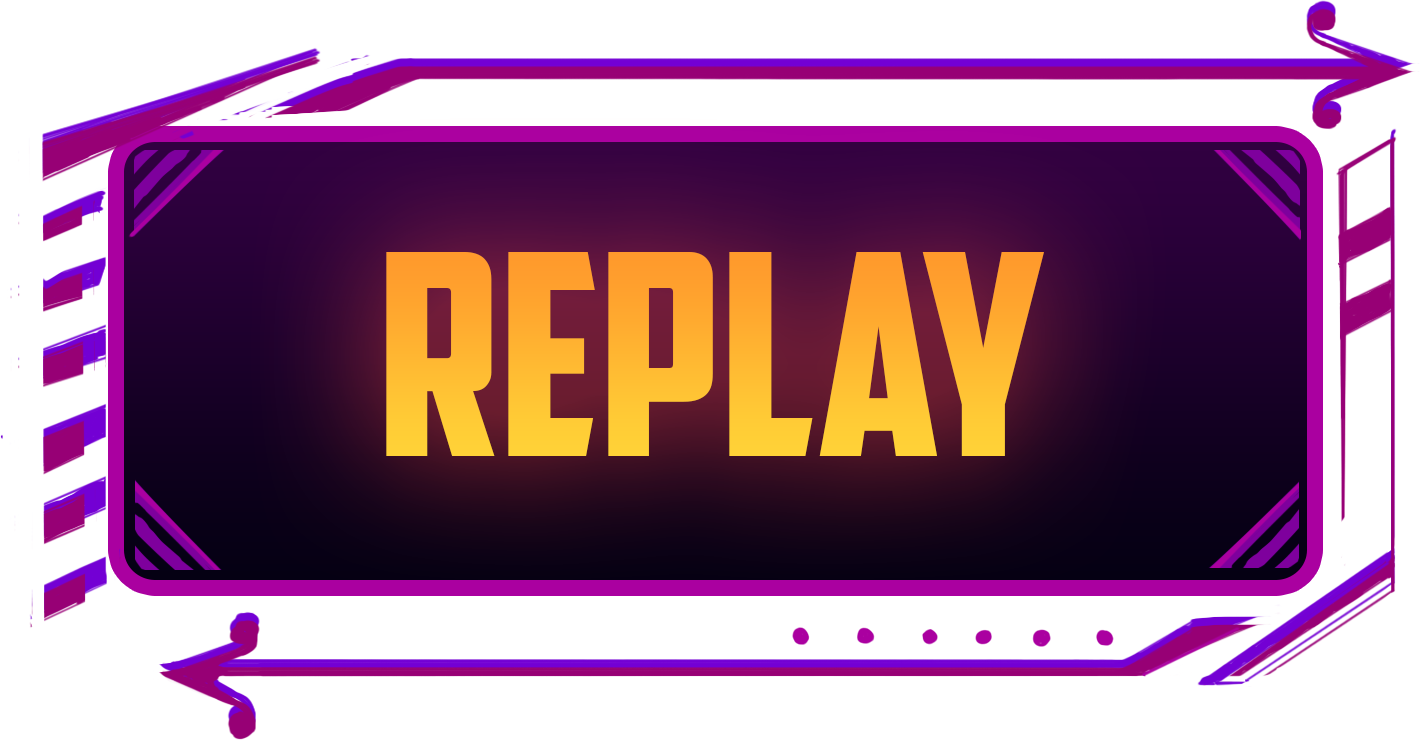
<style>
.page{position:relative;width:1420px;height:740px;background:#ffffff}
.page>*{position:absolute;margin:0}
.t1{font:280.8px "AmericanCaptain"}
</style>
<div class="page">
<p class="t1" style="left:386px;top:252px;width:658px;height:204px">Replay</p>
</div>
